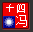
<style>
.page{position:relative;width:33px;height:32px;background:#f20000}
.page>*{position:absolute;margin:0}
.t1{font:10.4px "SimSun";color:#ffffff}
.t2{font:11.7px "SimSun";color:#ffffff}
</style>
<div class="page">
<p class="t1" style="left:6px;top:4px;width:19px;height:9px">十四</p>
<p class="t2" style="left:16px;top:15px;width:11px;height:12px">冯</p>
</div>
